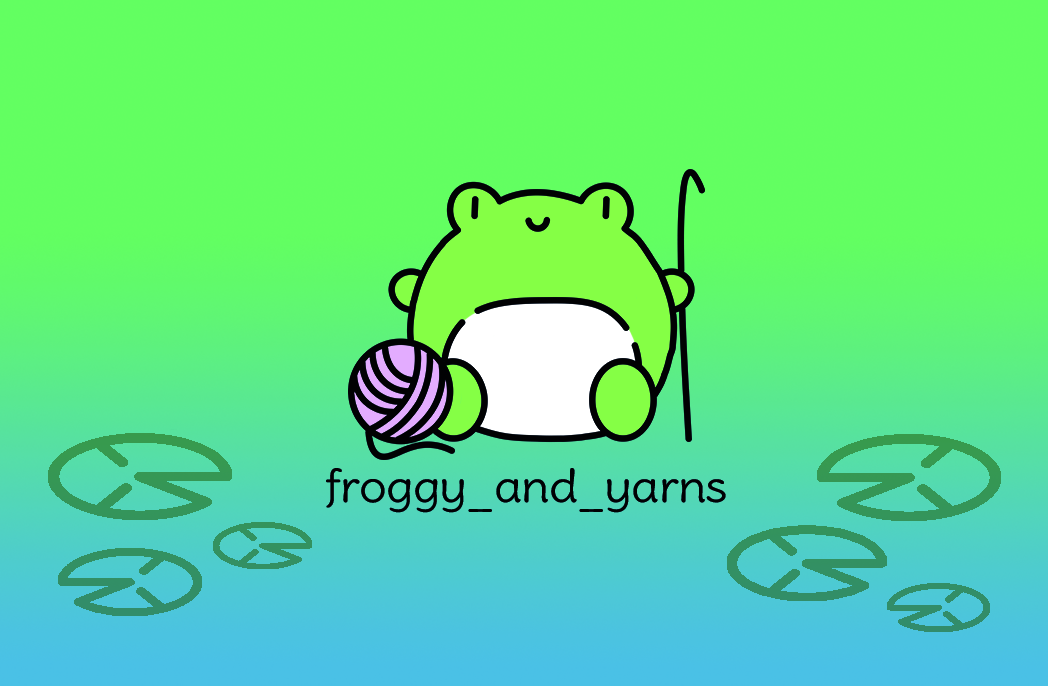
<style>
.page{position:relative;width:1048px;height:686px;background:#62ff61}
.page>*{position:absolute;margin:0}
.t1{font:44.8px "DeliusSwashCaps-Regular";letter-spacing:-0.02em;color:#010102;scale:1.1 1}
</style>
<div class="page">
<p class="t1" style="left:326px;top:468px;width:400px;height:45px">froggy_and_yarns</p>
</div>
